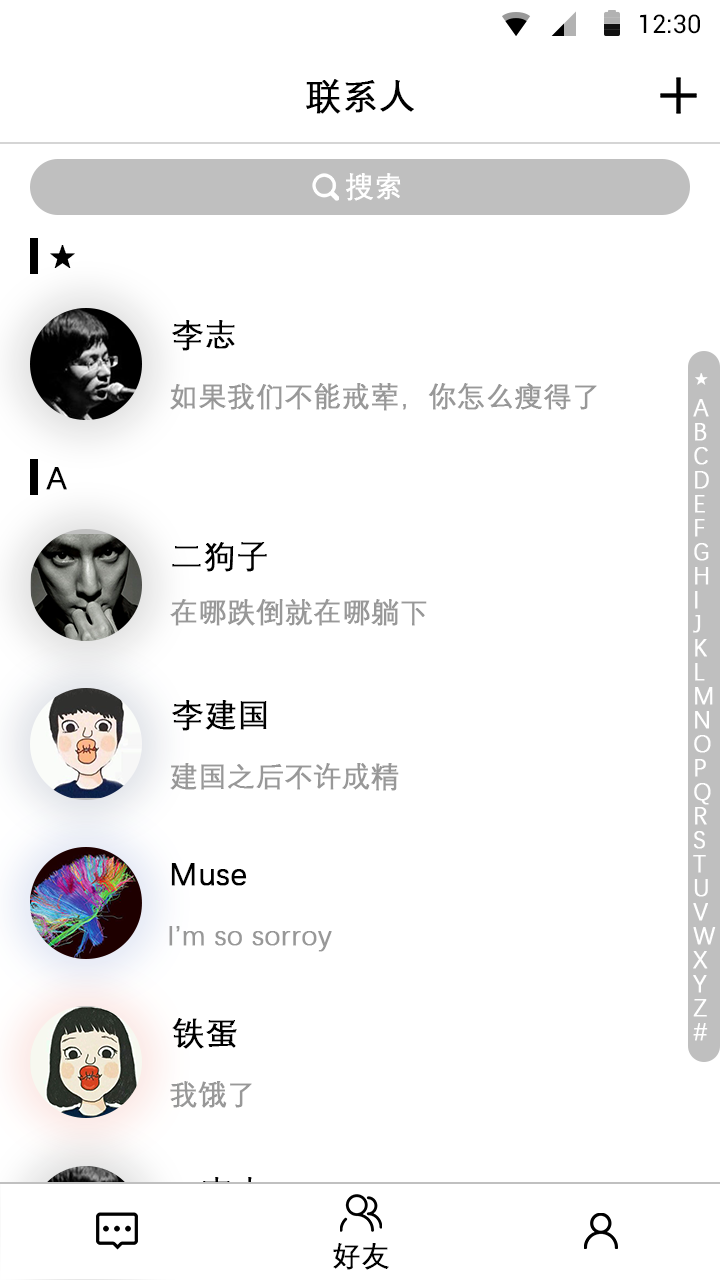
<style>
.page{position:relative;width:720px;height:1280px;background:#ffffff}
.page>*{position:absolute;margin:0}
.t1{font:25.4px "Roboto-Regular";color:#000000}
.t2{font:36px "DengXian-Regular";color:#000000;font-weight:bold}
.t3{font:28px "DengXian-Regular";color:#ffffff;font-weight:bold}
.t4{font:32px "DengXian-Regular";color:#000000;font-weight:bold}
.t5{font:24px/24px "DengXian-Regular";color:#ffffff;font-weight:bold}
.t6{font:16px/24px "DengXian-Regular";color:#ffffff;font-weight:bold}
.t7{font:28px "DengXian-Regular";color:#989898;font-weight:bold}
.t8{font:28px "DengXian-Regular";color:#000000;font-weight:bold}
</style>
<div class="page">
<p class="t1" style="left:640px;top:14px;width:60px;height:20px">12:30</p>
<p class="t2" style="left:306px;top:79px;width:108px;height:35px">联系人</p>
<p class="t3" style="left:346px;top:173px;width:55px;height:28px">搜索</p>
<p class="t4" style="left:50px;top:245px;width:25px;height:23px">★</p>
<p class="t4" style="left:172px;top:320px;width:63px;height:31px">李志</p>
<p class="t5" style="left:693px;top:373px;width:23px;height:668px"><span class="t6">★<br></span>A<br>B<br>C<br>D<br>E<br>F<br>G<br>H<br>I<br>J<br>K<br>L<br>M<br>N<br>O<br>P<br>Q<br>R<br>S<br>T<br>U<br>V<br>W<br>X<br>Y<br>Z<br>#</p>
<p class="t7" style="left:170px;top:383px;width:427px;height:28px">如果我们不能戒荤，你怎么瘦得了</p>
<p class="t4" style="left:46px;top:467px;width:21px;height:23px">A</p>
<p class="t4" style="left:172px;top:542px;width:95px;height:30px">二狗子</p>
<p class="t7" style="left:170px;top:599px;width:257px;height:27px">在哪跌倒就在哪躺下</p>
<p class="t4" style="left:172px;top:700px;width:95px;height:31px">李建国</p>
<p class="t7" style="left:170px;top:763px;width:229px;height:28px">建国之后不许成精</p>
<p class="t4" style="left:171px;top:863px;width:76px;height:23px">Muse</p>
<p class="t7" style="left:169px;top:926px;width:163px;height:26px">I’m so sorroy</p>
<p class="t4" style="left:172px;top:1018px;width:65px;height:31px">铁蛋</p>
<p class="t7" style="left:170px;top:1081px;width:82px;height:27px">我饿了</p>
<p class="t8" style="left:333px;top:1243px;width:56px;height:27px">好友</p>
</div>
